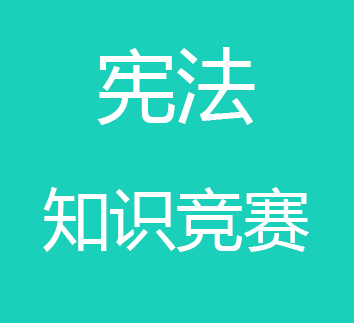
<style>
.page{position:relative;width:354px;height:323px;background:#1ad0ba}
.page>*{position:absolute;margin:0}
.t1{font:66.7px "MicrosoftYaHei";color:#ffffff}
.t2{font:80px "MicrosoftYaHei";color:#ffffff}
</style>
<div class="page">
<p class="t1" style="left:43px;top:47px;width:267px;height:205px;text-align:center"><span class="t2">宪法<br></span>知识竞赛</p>
</div>
